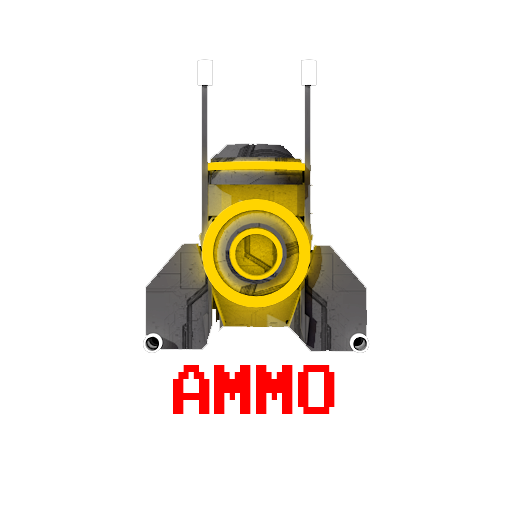
<style>
.page{position:relative;width:512px;height:512px;background:#ffffff}
.page>*{position:absolute;margin:0}
.t1{font:56.1px "PressStartK";color:#ff0000;scale:0.74 1}
</style>
<div class="page">
<p class="t1" style="left:173px;top:365px;width:162px;height:49px">AMMO</p>
</div>
